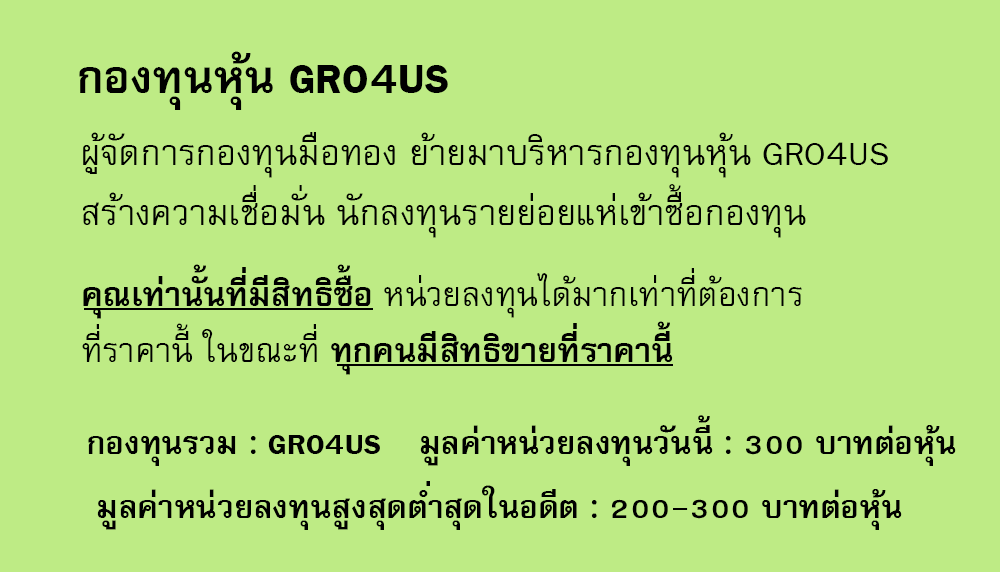
<style>
.page{position:relative;width:1000px;height:572px;background:#beeb85}
.page>*{position:absolute;margin:0}
.t1{font:64px "FreesiaUPCBold";color:#000000}
.t2{font:50px/60px "FreesiaUPC";color:#000000}
.t3{font:47px "FreesiaUPC";color:#000000}
.t4{font:47px "FreesiaUPCBold";color:#000000}
.t5{font:45px "FreesiaUPCBold";color:#000000}
</style>
<div class="page">
<p class="t1" style="left:79px;top:51px;width:369px;height:59px">กองทุนหุ้น GRO4US</p>
<p class="t2" style="left:83px;top:132px;width:805px;height:106px">ผู้จัดการกองทุนมือทอง ย้ายมาบริหารกองทุนหุ้น GRO4US<br>สร้างความเชื่อมั่น นักลงทุนรายย่อยแห่เข้าซื้อกองทุน</p>
<p class="t3" style="left:82px;top:264px;width:720px;height:111px"><span class="t4">คุณเท่านั้นที่มีสิทธิซื้อ </span>หน่วยลงทุนได้มากเท่าที่ต้องการ<br>ที่ราคานี้ ในขณะที่<span class="t4"> ทุกคนมีสิทธิขายที่ราคานี้</span></p>
<p class="t5" style="left:420px;top:415px;width:536px;height:51px">มูลค่าหน่วยลงทุนวันนี้ : 300 บาทต่อหุ้น</p>
<p class="t5" style="left:88px;top:435px;width:292px;height:31px">กองทุนรวม : GRO4US</p>
<p class="t5" style="left:97px;top:481px;width:805px;height:49px">มูลค่าหน่วยลงทุนสูงสุดต่ำสุดในอดีต : 200-300 บาทต่อหุ้น</p>
</div>
